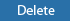
<style>
.page{position:relative;width:70px;height:21px;background:#2970a8}
.page>*{position:absolute;margin:0}
.t1{font:13.9px "MyriadPro-Regular";color:#ffffff}
</style>
<div class="page">
<p class="t1" style="left:18px;top:5px;width:37px;height:10px">Delete</p>
</div>
